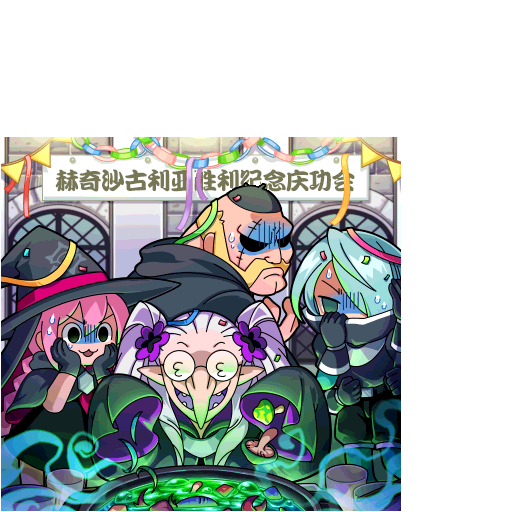
<style>
.page{position:relative;width:512px;height:512px;background:#ffffff}
.page>*{position:absolute;margin:0}
.t1{font:24px "DFPKanTingLiuW9";letter-spacing:-0.04em;color:#777755}
</style>
<div class="page">
<p class="t1" style="left:55px;top:169px;width:300px;height:23px">赫奇沙古利亚胜利纪念庆功会</p>
</div>
